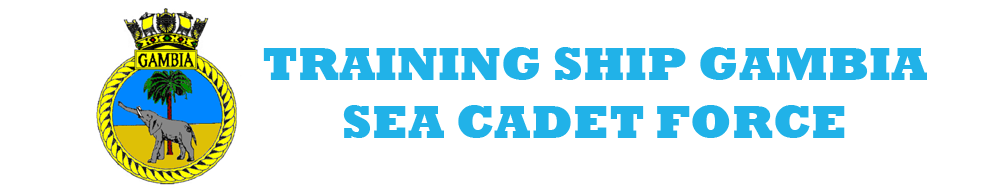
<style>
.page{position:relative;width:1000px;height:188px;background:#ffffff}
.page>*{position:absolute;margin:0}
.t1{font:48px "Rockwell-ExtraBold";color:#21b2e8}
</style>
<div class="page">
<p class="t1" style="left:263px;top:47px;width:664px;height:91px;text-align:center">TRAINING SHIP GAMBIA<br>SEA CADET FORCE</p>
</div>
